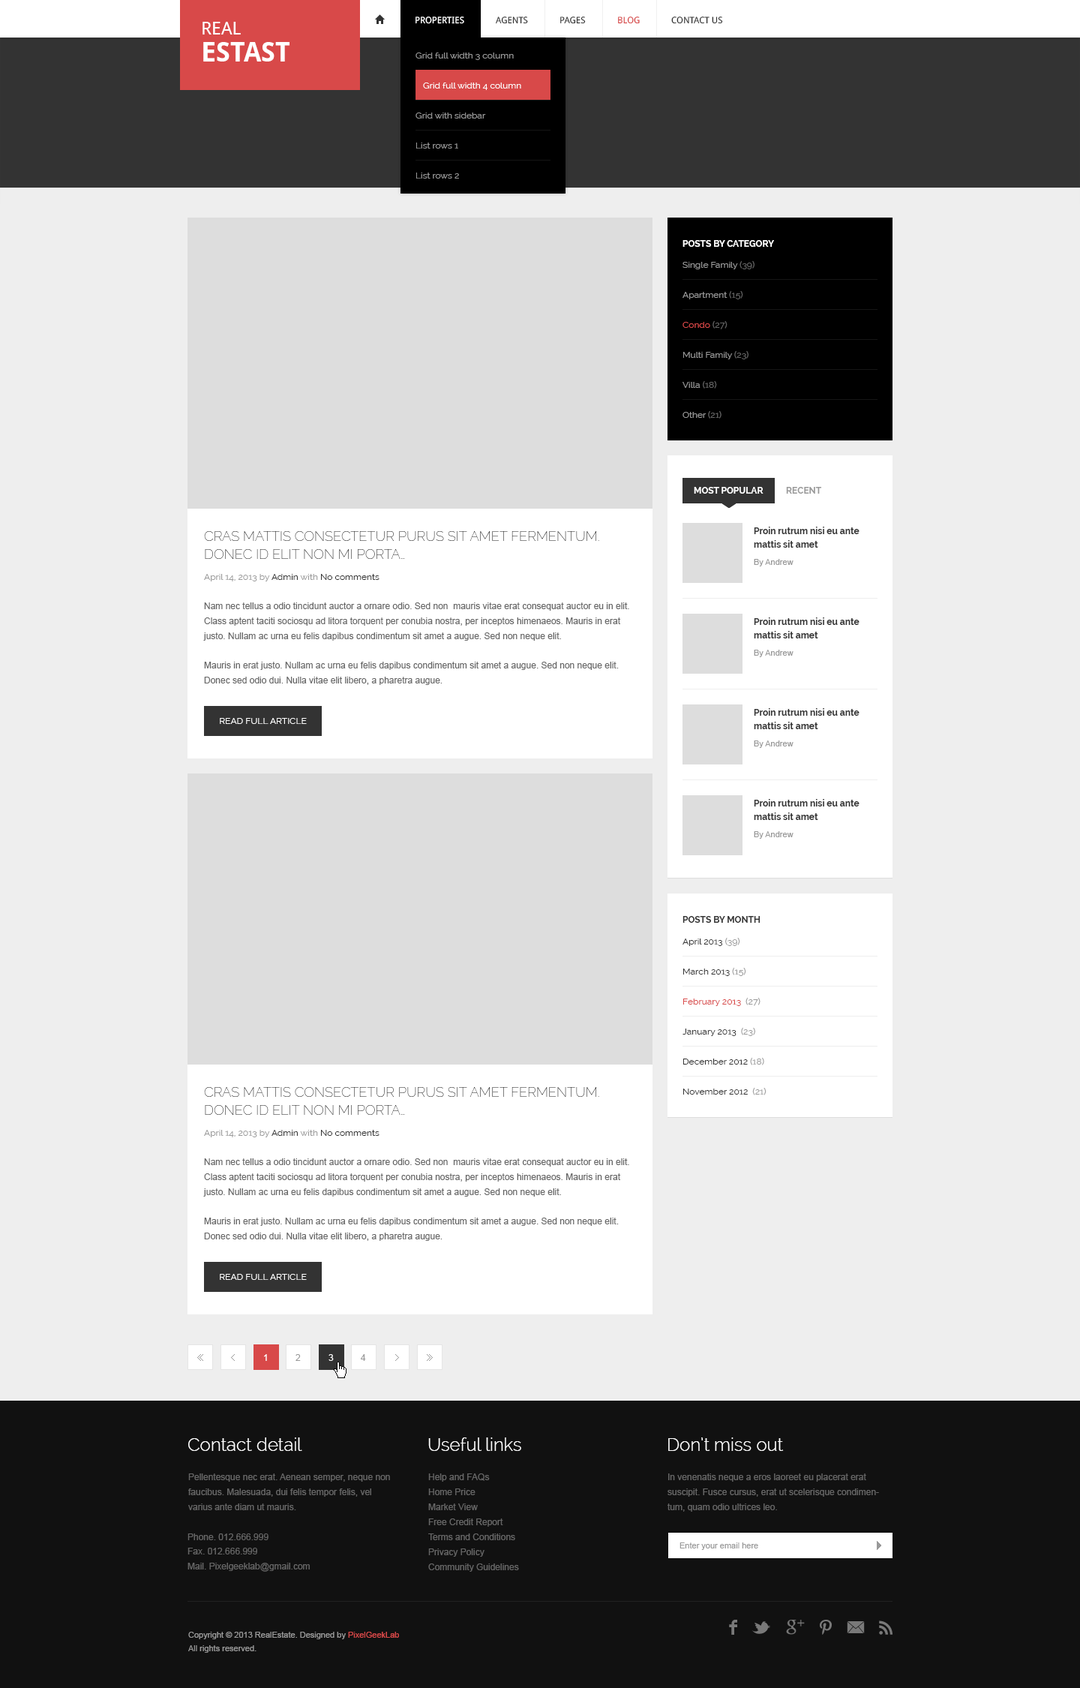
<style>
.page{position:relative;width:1080px;height:1688px;background:#eeeeee}
.page>*{position:absolute;margin:0}
.t1{font:9px "DroidSans";color:#ffffff;text-transform:uppercase}
.t2{font:9px "DroidSans";color:#333333;text-transform:uppercase}
.t3{font:9px "DroidSans";color:#d84949;text-transform:uppercase}
.t4{font:27px/27px "DroidSans-Bold";color:#ffffff;text-transform:uppercase}
.t5{font:18px/27px "DroidSans";color:#ffffff;text-transform:uppercase}
.t6{font:9px "Raleway";color:#999999}
.t7{font:9px "Raleway";color:#ffffff}
.t8{font:9px "Raleway-Bold";color:#ffffff;text-transform:uppercase}
.t9{font:9px "Raleway";color:#666666}
.t10{font:9px "Raleway";color:#d84949}
.t11{font:9px "Raleway-Bold";color:#999999;text-transform:uppercase}
.t12{font:13.5px/18px "Raleway-Thin";color:#333333;text-transform:uppercase}
.t13{font:9px/13.5px "Raleway-Bold";color:#333333}
.t14{font:8.2px "ArialMT";color:#999999}
.t15{font:9px "Raleway";color:#333333}
.t16{font:9px/15px "ArialMT";color:#666666}
.t17{font:9px "Raleway";color:#ffffff;text-transform:uppercase}
.t18{font:9px "Raleway-Bold";color:#333333;text-transform:uppercase}
.t19{font:9px "ArialMT";color:#ffffff}
.t20{font:9px "ArialMT";color:#999999}
</style>
<div class="page">
<p class="t1" style="left:416px;top:16px;width:48px;height:8px">Properties</p>
<p class="t2" style="left:496px;top:16px;width:32px;height:8px">agents</p>
<p class="t2" style="left:560px;top:16px;width:26px;height:8px">pages</p>
<p class="t3" style="left:618px;top:16px;width:22px;height:8px">blog</p>
<p class="t2" style="left:671px;top:16px;width:52px;height:8px">contact us</p>
<p class="t4" style="left:202px;top:22px;width:88px;height:40px"><span class="t5">Real <br></span>Estast</p>
<p class="t6" style="left:416px;top:52px;width:98px;height:8px">Grid full width 3 column</p>
<p class="t7" style="left:423px;top:82px;width:98px;height:8px">Grid full width 4 column</p>
<p class="t6" style="left:416px;top:112px;width:70px;height:6px">Grid with sidebar</p>
<p class="t6" style="left:416px;top:142px;width:42px;height:6px">List rows 1</p>
<p class="t6" style="left:416px;top:172px;width:43px;height:6px">List rows 2</p>
<p class="t8" style="left:682px;top:240px;width:92px;height:7px">Posts By Category</p>
<p class="t6" style="left:682px;top:260px;width:72px;height:9px">Single Family <span class="t9">(39)</span></p>
<p class="t6" style="left:682px;top:290px;width:61px;height:9px">Apartment <span class="t9">(15)</span></p>
<p class="t10" style="left:682px;top:320px;width:46px;height:9px">Condo <span class="t9">(27)</span></p>
<p class="t6" style="left:683px;top:350px;width:65px;height:9px">Multi Family <span class="t9">(23)</span></p>
<p class="t6" style="left:682px;top:381px;width:35px;height:7px">Villa <span class="t9">(18)</span></p>
<p class="t6" style="left:682px;top:410px;width:40px;height:8px">Other <span class="t9">(21)</span></p>
<p class="t8" style="left:694px;top:487px;width:70px;height:7px">Most Popular</p>
<p class="t11" style="left:786px;top:487px;width:36px;height:7px">Recent</p>
<p class="t12" style="left:204px;top:531px;width:395px;height:28px">Cras mattis consectetur purus sit amet fermentum. Donec id elit non mi porta…</p>
<p class="t13" style="left:754px;top:526px;width:106px;height:22px">Proin rutrum nisi eu ante mattis sit amet</p>
<p class="t14" style="left:754px;top:559px;width:40px;height:7px">By Andrew</p>
<p class="t6" style="left:204px;top:574px;width:176px;height:7px">April 14, 2013 by <span class="t15">Admin</span> with <span class="t15">No comments</span></p>
<p class="t16" style="left:203px;top:602px;width:426px;height:38px">Nam nec tellus a odio tincidunt auctor a ornare odio. Sed non  mauris vitae erat consequat auctor eu in elit. Class aptent taciti sociosqu ad litora torquent per conubia nostra, per inceptos himenaeos. Mauris in erat justo. Nullam ac urna eu felis dapibus condimentum sit amet a augue. Sed non neque elit.</p>
<p class="t13" style="left:754px;top:617px;width:106px;height:21px">Proin rutrum nisi eu ante mattis sit amet</p>
<p class="t14" style="left:754px;top:650px;width:40px;height:7px">By Andrew</p>
<p class="t16" style="left:204px;top:662px;width:415px;height:23px">Mauris in erat justo. Nullam ac urna eu felis dapibus condimentum sit amet a augue. Sed non neque elit. Donec sed odio dui. Nulla vitae elit libero, a pharetra augue.</p>
<p class="t13" style="left:754px;top:708px;width:106px;height:21px">Proin rutrum nisi eu ante mattis sit amet</p>
<p class="t17" style="left:220px;top:718px;width:87px;height:6px">read full article</p>
<p class="t14" style="left:754px;top:740px;width:40px;height:8px">By Andrew</p>
<p class="t13" style="left:754px;top:799px;width:106px;height:21px">Proin rutrum nisi eu ante mattis sit amet</p>
<p class="t14" style="left:754px;top:831px;width:40px;height:7px">By Andrew</p>
<p class="t18" style="left:682px;top:916px;width:78px;height:6px">Posts By Month</p>
<p class="t15" style="left:682px;top:938px;width:58px;height:8px">April 2013<span class="t6"> (39)</span></p>
<p class="t15" style="left:683px;top:967px;width:63px;height:9px">March 2013<span class="t6"> (15)</span></p>
<p class="t10" style="left:683px;top:997px;width:77px;height:9px">February 2013 <span class="t6"> (27)</span></p>
<p class="t15" style="left:682px;top:1027px;width:73px;height:9px">January 2013 <span class="t6"> (23)</span></p>
<p class="t15" style="left:683px;top:1057px;width:81px;height:8px">December 2012<span class="t6"> (18)</span></p>
<p class="t12" style="left:204px;top:1087px;width:395px;height:27px">Cras mattis consectetur purus sit amet fermentum. Donec id elit non mi porta…</p>
<p class="t15" style="left:683px;top:1087px;width:83px;height:8px">November 2012<span class="t6">  (21)</span></p>
<p class="t6" style="left:204px;top:1130px;width:176px;height:7px">April 14, 2013 by <span class="t15">Admin</span> with <span class="t15">No comments</span></p>
<p class="t16" style="left:203px;top:1158px;width:426px;height:38px">Nam nec tellus a odio tincidunt auctor a ornare odio. Sed non  mauris vitae erat consequat auctor eu in elit. Class aptent taciti sociosqu ad litora torquent per conubia nostra, per inceptos himenaeos. Mauris in erat justo. Nullam ac urna eu felis dapibus condimentum sit amet a augue. Sed non neque elit.</p>
<p class="t16" style="left:204px;top:1217px;width:415px;height:23px">Mauris in erat justo. Nullam ac urna eu felis dapibus condimentum sit amet a augue. Sed non neque elit. Donec sed odio dui. Nulla vitae elit libero, a pharetra augue.</p>
<p class="t17" style="left:220px;top:1274px;width:87px;height:6px">read full article</p>
<p class="t19" style="left:264px;top:1354px;width:3px;height:6px">1</p>
<p class="t20" style="left:296px;top:1354px;width:5px;height:6px">2</p>
<p class="t19" style="left:328px;top:1354px;width:6px;height:6px">3</p>
<p class="t20" style="left:361px;top:1354px;width:5px;height:6px">4</p>
</div>
